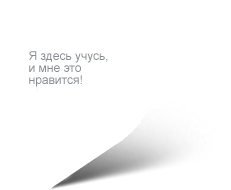
<style>
.page{position:relative;width:231px;height:190px;background:#ffffff}
.page>*{position:absolute;margin:0}
.t1{font:12px/12px "ArialMT";color:#888b90}
</style>
<div class="page">
<p class="t1" style="left:29px;top:51px;width:79px;height:36px">Я здесь учусь, <br>и мне это<br>нравится!</p>
</div>
